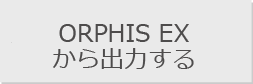
<style>
.page{position:relative;width:253px;height:84px;background:#eaeaea}
.page>*{position:absolute;margin:0}
.t1{font:24px/26px "Meiryo";color:#4e4c4c}
</style>
<div class="page">
<p class="t1" style="left:53px;top:24px;width:141px;height:45px;text-align:center">ORPHIS EX<br>から出力する</p>
</div>
